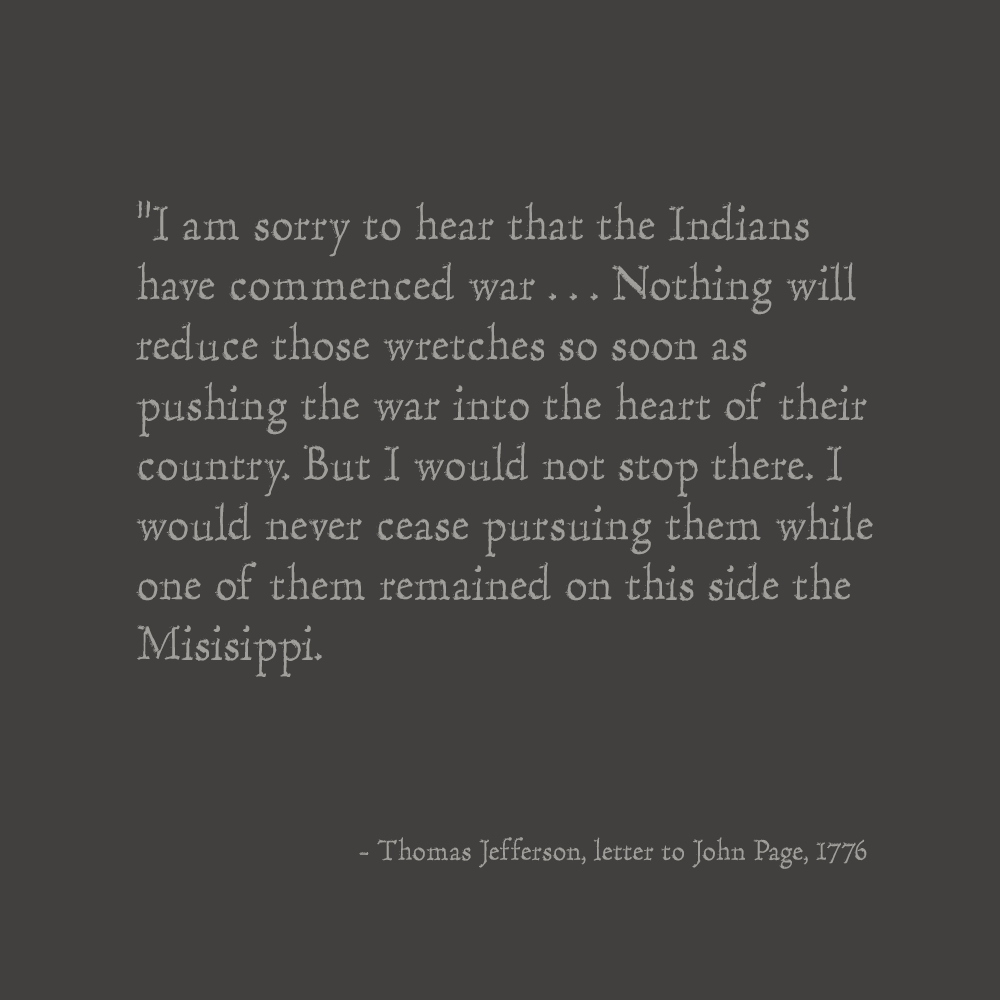
<style>
.page{position:relative;width:1000px;height:1000px;background:#41403e}
.page>*{position:absolute;margin:0}
.t1{font:50px/60px "HultogEngraved";color:#a19f9b}
.t2{font:30px "HultogEngraved";color:#a19f9b}
</style>
<div class="page">
<p class="t1" style="left:136px;top:200px;width:737px;height:477px">“I am sorry to hear that the Indians have commenced war . . . Nothing will reduce those wretches so soon as pushing the war into the heart of their country. But I would not stop there. I would never cease pursuing them while one of them remained on this side the Misisippi.</p>
<p class="t2" style="left:359px;top:837px;width:508px;height:32px">- Thomas Jefferson, letter to John Page, 1776</p>
</div>
